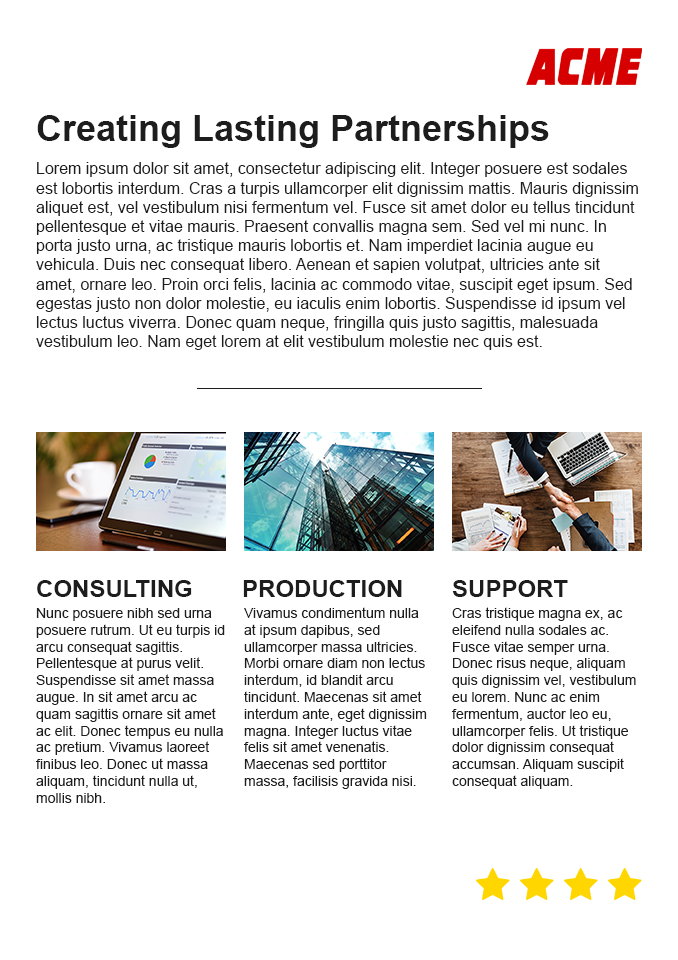
<style>
.page{position:relative;width:678px;height:960px;background:#ffffff}
.page>*{position:absolute;margin:0}
.t1{font:36px "Arial-BoldMT";color:#1d1d1d}
.t2{font:16px "ArialMT";color:#1d1d1d}
.t3{font:24px "Arial-BoldMT";color:#1d1d1d}
.t4{font:14px "ArialMT";color:#1d1d1d}
</style>
<div class="page">
<p class="t1" style="left:37px;top:115px;width:512px;height:33px">Creating Lasting Partnerships</p>
<p class="t2" style="left:36px;top:162px;width:602px;height:188px">Lorem ipsum dolor sit amet, consectetur adipiscing elit. Integer posuere est sodales est lobortis interdum. Cras a turpis ullamcorper elit dignissim mattis. Mauris dignissim aliquet est, vel vestibulum nisi fermentum vel. Fusce sit amet dolor eu tellus tincidunt pellentesque et vitae mauris. Praesent convallis magna sem. Sed vel mi nunc. In porta justo urna, ac tristique mauris lobortis et. Nam imperdiet lacinia augue eu vehicula. Duis nec consequat libero. Aenean et sapien volutpat, ultricies ante sit amet, ornare leo. Proin orci felis, lacinia ac commodo vitae, suscipit eget ipsum. Sed egestas justo non dolor molestie, eu iaculis enim lobortis. Suspendisse id ipsum vel lectus luctus viverra. Donec quam neque, fringilla quis justo sagittis, malesuada vestibulum leo. Nam eget lorem at elit vestibulum molestie nec quis est.</p>
<p class="t3" style="left:37px;top:580px;width:155px;height:17px">CONSULTING</p>
<p class="t3" style="left:243px;top:580px;width:159px;height:17px">PRODUCTION</p>
<p class="t3" style="left:452px;top:580px;width:116px;height:17px">SUPPORT</p>
<p class="t4" style="left:36px;top:608px;width:189px;height:195px">Nunc posuere nibh sed urna posuere rutrum. Ut eu turpis id arcu consequat sagittis. Pellentesque at purus velit. Suspendisse sit amet massa augue. In sit amet arcu ac quam sagittis ornare sit amet ac elit. Donec tempus eu nulla ac pretium. Vivamus laoreet finibus leo. Donec ut massa aliquam, tincidunt nulla ut, mollis nibh.</p>
<p class="t4" style="left:244px;top:607px;width:183px;height:182px">Vivamus condimentum nulla at ipsum dapibus, sed ullamcorper massa ultricies. Morbi ornare diam non lectus interdum, id blandit arcu tincidunt. Maecenas sit amet interdum ante, eget dignissim magna. Integer luctus vitae felis sit amet venenatis. Maecenas sed porttitor massa, facilisis gravida nisi.</p>
<p class="t4" style="left:452px;top:607px;width:184px;height:182px">Cras tristique magna ex, ac eleifend nulla sodales ac. Fusce vitae semper urna. Donec risus neque, aliquam quis dignissim vel, vestibulum eu lorem. Nunc ac enim fermentum, auctor leo eu, ullamcorper felis. Ut tristique dolor dignissim consequat accumsan. Aliquam suscipit consequat aliquam.</p>
</div>
